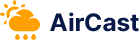
<style>
.page{position:relative;width:139px;height:40px;background:#ffffff}
.page>*{position:absolute;margin:0}
.t1{font:24px "Inter-Bold";color:#071a47}
</style>
<div class="page">
<p class="t1" style="left:50px;top:12px;width:89px;height:20px">AirCast</p>
</div>
